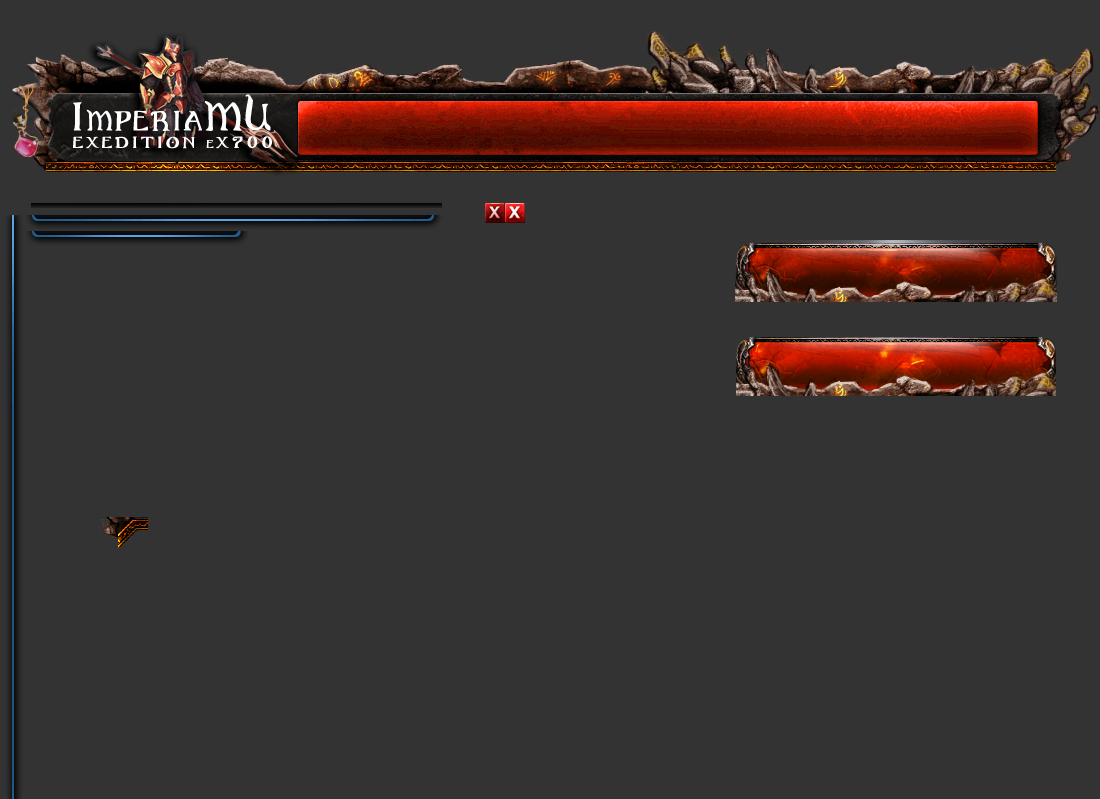
<style>
.page{position:relative;width:1100px;height:799px;background:#333333}
.page>*{position:absolute;margin:0}
.t1{font:20px "GothicBirthdayCake";letter-spacing:0.15em;color:#fefefe;font-variant:small-caps;font-weight:bold;scale:1.2 1}
.t2{font:8px "GothicBirthdayCake";letter-spacing:0.3em;color:#fefefe;font-variant:small-caps;font-weight:bold;scale:1.4 1}
</style>
<div class="page">
<p class="t1" style="left:73px;top:94px;width:198px;height:37px">ImperiaMU</p>
<p class="t2" style="left:73px;top:136px;width:199px;height:13px">EXEDITION eX700</p>
</div>
